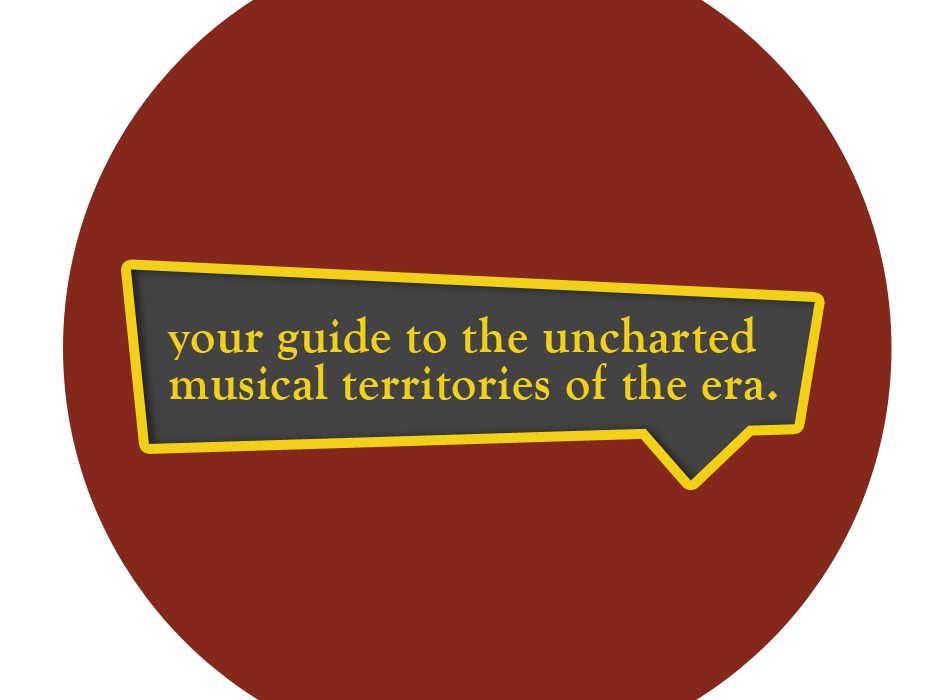
<style>
.page{position:relative;width:950px;height:700px;background:#83281a}
.page>*{position:absolute;margin:0}
.t1{font:49.5px/47.5px "GoudyOldStyleT-Bold";letter-spacing:0.02em;color:#f3d018}
</style>
<div class="page">
<p class="t1" style="left:167px;top:316px;width:610px;height:84px">your guide to the uncharted <br>musical territories of the era.</p>
</div>
